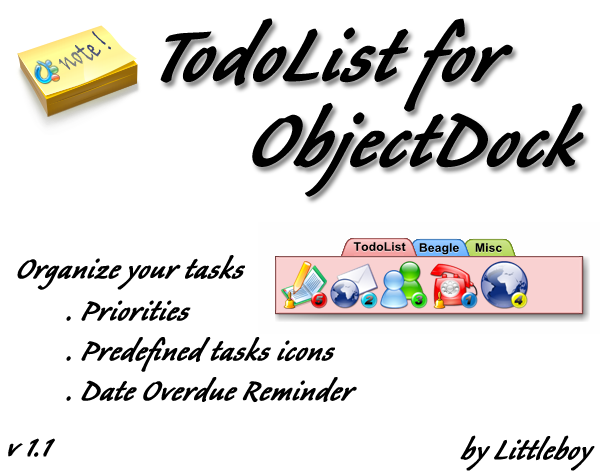
<style>
.page{position:relative;width:600px;height:474px;background:#ffffff}
.page>*{position:absolute;margin:0}
.t1{font:96px/85px "CalibanStd";color:#000000;font-weight:bold;font-style:italic}
.t2{font:36px "CalibanStd";color:#000000;font-weight:bold;font-style:italic}
.t3{font:36px/40px "CalibanStd";color:#000000;font-weight:bold;font-style:italic}
</style>
<div class="page">
<p class="t1" style="left:160px;top:18px;width:424px;height:179px">TodoList for<br>     ObjectDock</p>
<p class="t2" style="left:17px;top:255px;width:228px;height:35px">Organize your tasks</p>
<p class="t3" style="left:66px;top:300px;width:291px;height:103px">. Priorities<br>. Predefined tasks icons<br>. Date Overdue Reminder</p>
<p class="t2" style="left:8px;top:438px;width:47px;height:19px">v 1.1</p>
<p class="t2" style="left:460px;top:435px;width:135px;height:36px">by Littleboy</p>
</div>
